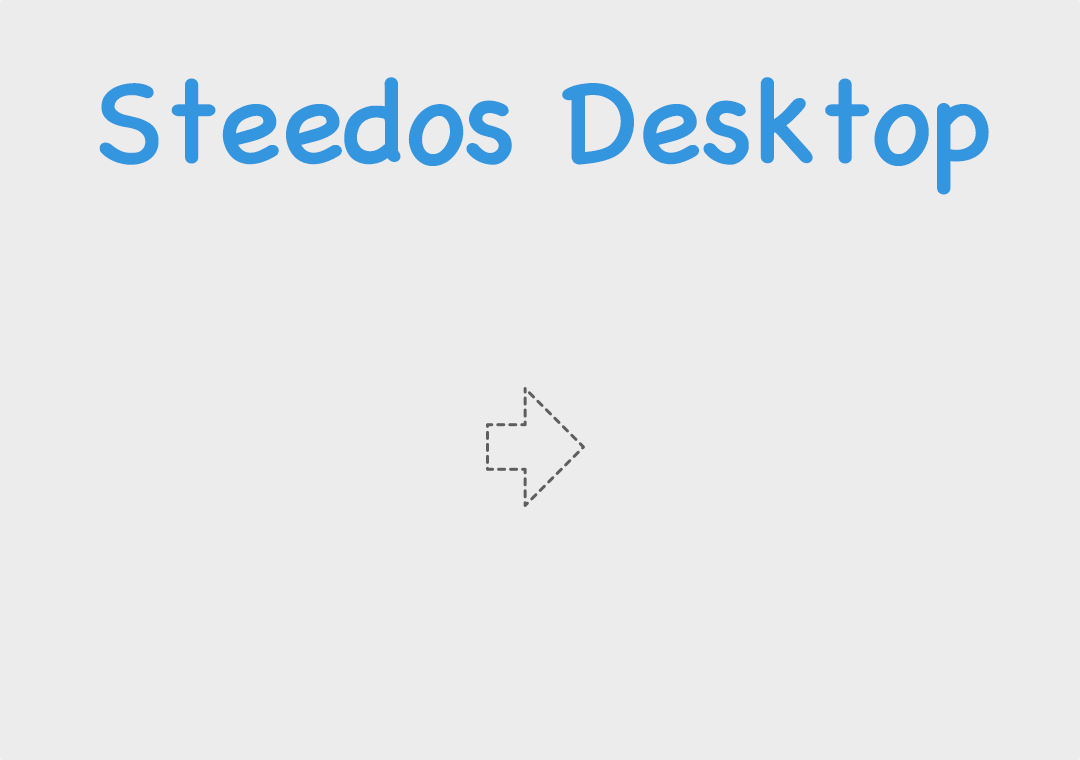
<style>
.page{position:relative;width:1080px;height:760px;background:#edecec}
.page>*{position:absolute;margin:0}
.t1{font:120px "ChalkboardSE-Regular";color:#3396df}
</style>
<div class="page">
<p class="t1" style="left:99px;top:77px;width:890px;height:118px">Steedos Desktop</p>
</div>
